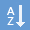
<style>
.page{position:relative;width:30px;height:30px;background:#649ad3}
.page>*{position:absolute;margin:0}
.t1{font:9.6px "KozGoPro-Regular";color:#ffffff;scale:1.25 1}
</style>
<div class="page">
<p class="t1" style="left:7px;top:7px;width:8px;height:8px">A</p>
<p class="t1" style="left:7px;top:17px;width:7px;height:8px">Z</p>
</div>
